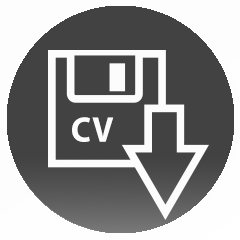
<style>
.page{position:relative;width:240px;height:240px;background:#424242}
.page>*{position:absolute;margin:0}
.t1{font:36px "MyriadPro-Bold";letter-spacing:0.025em;color:#fdfcfc;scale:0.93 1}
</style>
<div class="page">
<p class="t1" style="left:72px;top:117px;width:42px;height:25px">CV</p>
</div>
